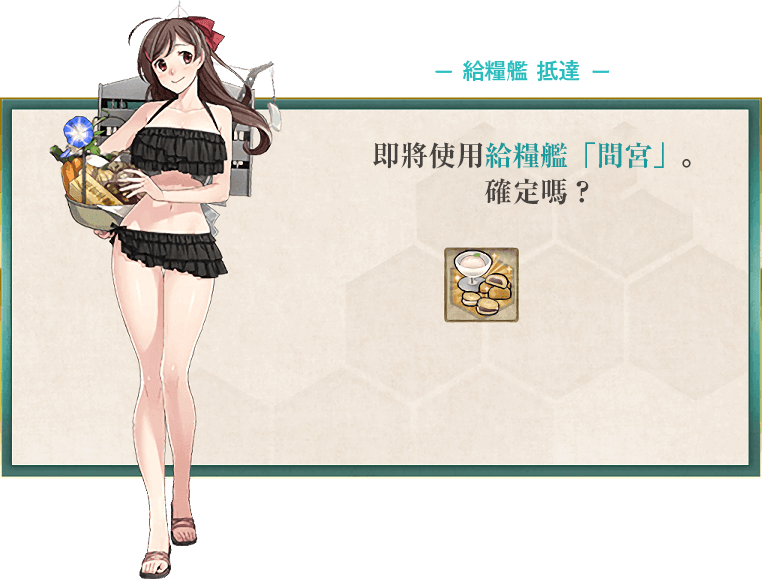
<style>
.page{position:relative;width:762px;height:579px;background:#ffffff}
.page>*{position:absolute;margin:0}
.t1{font:22px "GothicMB101Pr6N-Medium";color:#2bbcbe}
.t2{font:28px/36px "RyuminPr6N-ExBold";color:#199a9c}
.t3{font:28px/36px "RyuminPr6N-ExBold";color:#46423f}
</style>
<div class="page">
<p class="t1" style="left:463px;top:59px;width:117px;height:23px">給糧艦 抵達</p>
<p class="t2" style="left:373px;top:142px;width:318px;height:63px;text-align:center"><span class="t3">即將使用</span>給糧艦「間宮」<span class="t3">。<br>確定嗎？</span></p>
</div>
